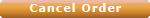
<style>
.page{position:relative;width:150px;height:18px}
.page>*{position:absolute;margin:0}
.t1{font:11px "Verdana-Bold";letter-spacing:0.1em;color:#ffffff}
</style>
<div class="page">
<p class="t1" style="left:30px;top:3px;width:92px;height:9px">Cancel Order</p>
</div>
